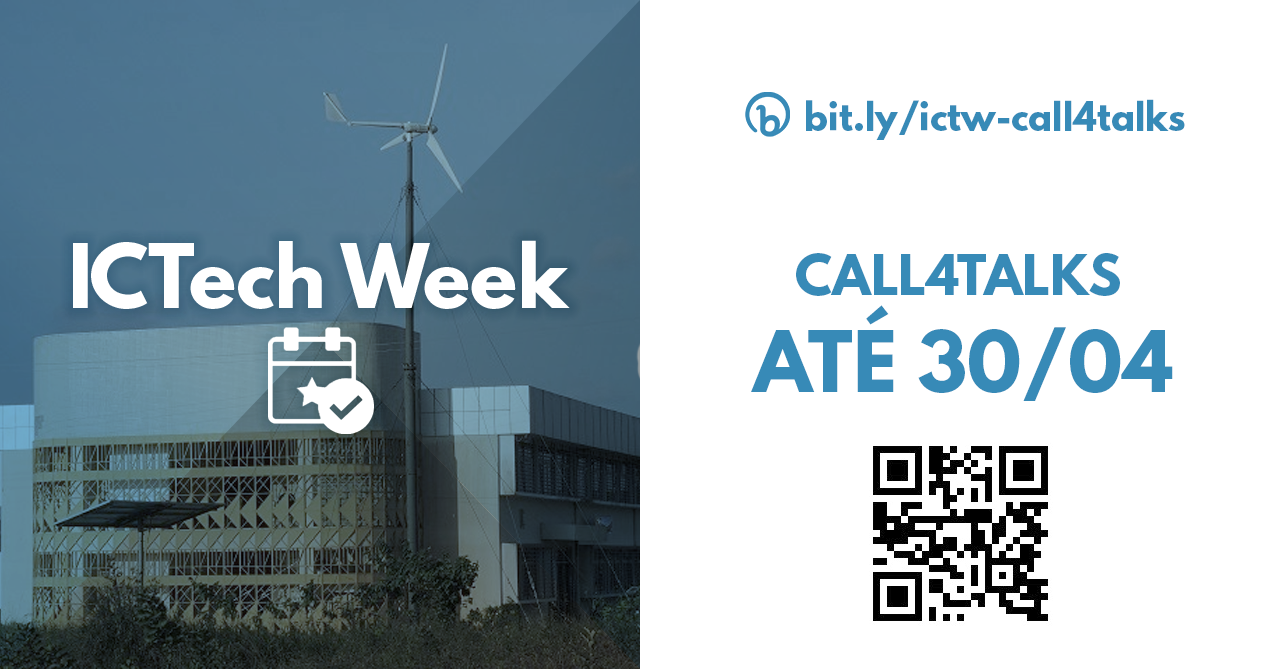
<style>
.page{position:relative;width:1280px;height:669px;background:#ffffff}
.page>*{position:absolute;margin:0}
.t1{font:35.3px "LeagueSpartan-Bold";color:#378ab7}
.t2{font:78.3px "LeagueSpartan-Bold";color:#ffffff}
.t3{font:49.2px "LeagueSpartan-Bold";color:#378ab7}
.t4{font:75.3px "LeagueSpartan-Bold";color:#378ab7}
</style>
<div class="page">
<p class="t1" style="left:806px;top:99px;width:379px;height:41px">bit.ly/ictw-call4talks</p>
<p class="t2" style="left:73px;top:240px;width:497px;height:69px">ICTech Week</p>
<p class="t3" style="left:796px;top:253px;width:324px;height:43px">CALL4TALKS</p>
<p class="t4" style="left:751px;top:305px;width:422px;height:96px">ATÉ 30/04</p>
</div>
